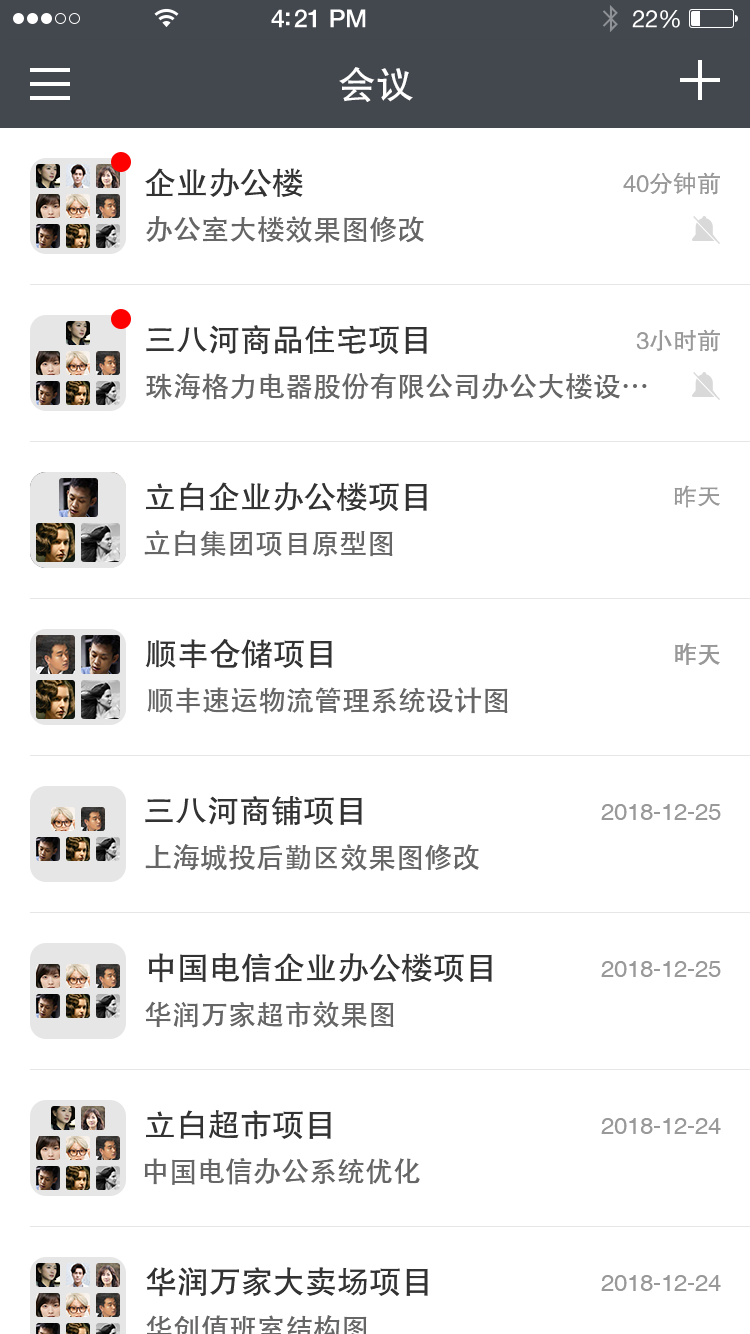
<style>
.page{position:relative;width:750px;height:1334px;background:#ffffff}
.page>*{position:absolute;margin:0}
.t1{font:38px "FZHTJW--GB1-0";color:#ffffff}
.t2{font:32px "FZHTJW--GB1-0";color:#333333}
.t3{font:24px "FZHTJW--GB1-0";color:#999999}
.t4{font:28px "AdobeHeitiStd-Regular";color:#666666}
.t5{font:24px "AdobeHeitiStd-Regular";color:#999999}
.t6{font:24px "Helvetica";color:#999999}
</style>
<div class="page">
<p class="t1" style="left:339px;top:67px;width:74px;height:35px">会议</p>
<p class="t2" style="left:145px;top:168px;width:158px;height:29px">企业办公楼</p>
<p class="t3" style="left:623px;top:172px;width:97px;height:23px">40分钟前</p>
<p class="t4" style="left:146px;top:216px;width:278px;height:27px">办公室大楼效果图修改</p>
<p class="t2" style="left:146px;top:325px;width:281px;height:30px">三八河商品住宅项目</p>
<p class="t3" style="left:636px;top:329px;width:84px;height:23px">3小时前</p>
<p class="t4" style="left:146px;top:373px;width:501px;height:27px">珠海格力电器股份有限公司办公大楼设…</p>
<p class="t2" style="left:146px;top:482px;width:281px;height:29px">立白企业办公楼项目</p>
<p class="t3" style="left:674px;top:485px;width:46px;height:23px">昨天</p>
<p class="t4" style="left:144px;top:530px;width:249px;height:27px">立白集团项目原型图</p>
<p class="t2" style="left:145px;top:639px;width:187px;height:29px">顺丰仓储项目</p>
<p class="t5" style="left:675px;top:643px;width:45px;height:22px">昨天</p>
<p class="t4" style="left:147px;top:687px;width:361px;height:27px">顺丰速运物流管理系统设计图</p>
<p class="t2" style="left:145px;top:796px;width:217px;height:30px">三八河商铺项目</p>
<p class="t6" style="left:601px;top:804px;width:120px;height:16px">2018-12-25</p>
<p class="t4" style="left:145px;top:844px;width:334px;height:27px">上海城投后勤区效果图修改</p>
<p class="t2" style="left:148px;top:953px;width:344px;height:30px">中国电信企业办公楼项目</p>
<p class="t6" style="left:601px;top:961px;width:120px;height:16px">2018-12-25</p>
<p class="t4" style="left:145px;top:1001px;width:249px;height:27px">华润万家超市效果图</p>
<p class="t2" style="left:146px;top:1110px;width:185px;height:30px">立白超市项目</p>
<p class="t6" style="left:601px;top:1118px;width:120px;height:16px">2018-12-24</p>
<p class="t4" style="left:144px;top:1158px;width:276px;height:27px">中国电信办公系统优化</p>
<p class="t2" style="left:146px;top:1267px;width:282px;height:30px">华润万家大卖场项目</p>
<p class="t6" style="left:601px;top:1275px;width:120px;height:16px">2018-12-24</p>
</div>
